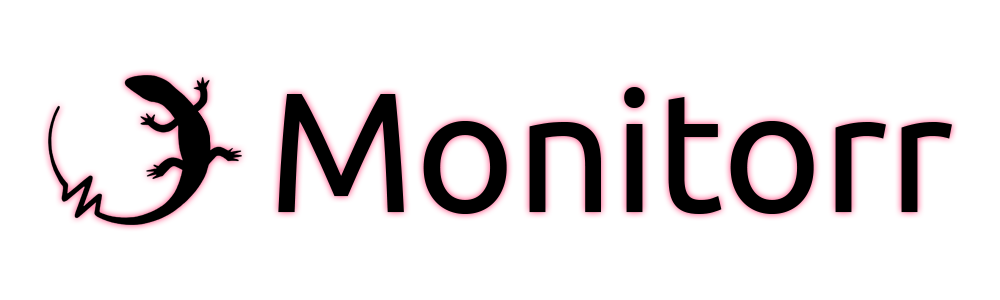
<style>
.page{position:relative;width:1000px;height:300px;background:#ffffff}
.page>*{position:absolute;margin:0}
.t1{font:170px "Ubuntu";color:#000000}
</style>
<div class="page">
<p class="t1" style="left:278px;top:87px;width:674px;height:127px">Monitorr</p>
</div>
